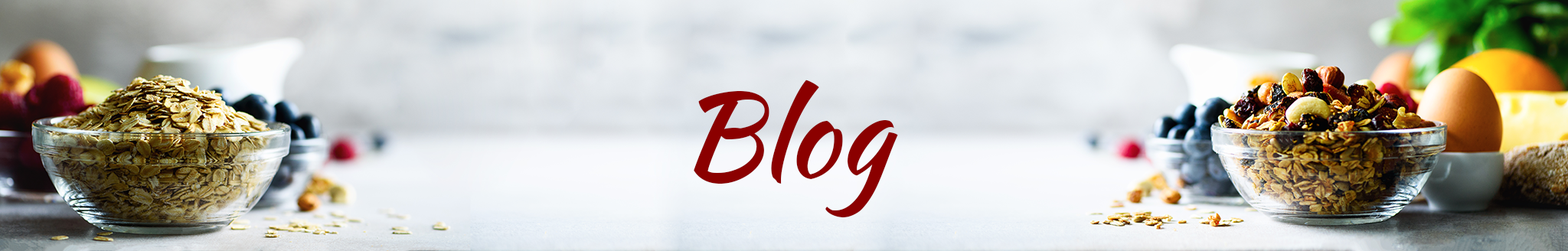
<style>
.page{position:relative;width:1568px;height:251px}
.page>*{position:absolute;margin:0}
.t1{font:114.8px "KaushanScript-Regular";color:#8b0000}
</style>
<div class="page">
<p class="t1" style="left:694px;top:80px;width:204px;height:137px">Blog</p>
</div>
